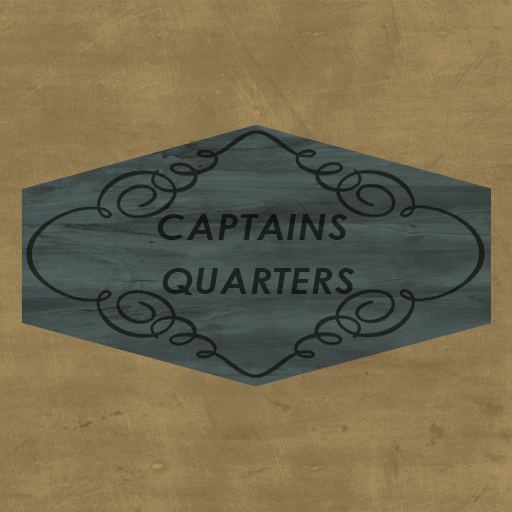
<style>
.page{position:relative;width:512px;height:512px}
.page>*{position:absolute;margin:0}
.t1{font:36px "CenturyGothic-BoldItalic";letter-spacing:0.025em;color:#1a201f;text-transform:uppercase;scale:1.07 1}
</style>
<div class="page">
<p class="t1" style="left:157px;top:214px;width:198px;height:81px;text-align:center">Captains <br>Quarters</p>
</div>
